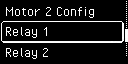
<style>
.page{position:relative;width:128px;height:64px;background:#000000}
.page>*{position:absolute;margin:0}
.t1{font:16px "PixelOperator";color:#ffffff}
</style>
<div class="page">
<p class="t1" style="left:5px;top:7px;width:89px;height:11px">Motor 2 Config</p>
<p class="t1" style="left:5px;top:27px;width:42px;height:11px">Relay 1</p>
<p class="t1" style="left:5px;top:48px;width:43px;height:11px">Relay 2</p>
</div>
